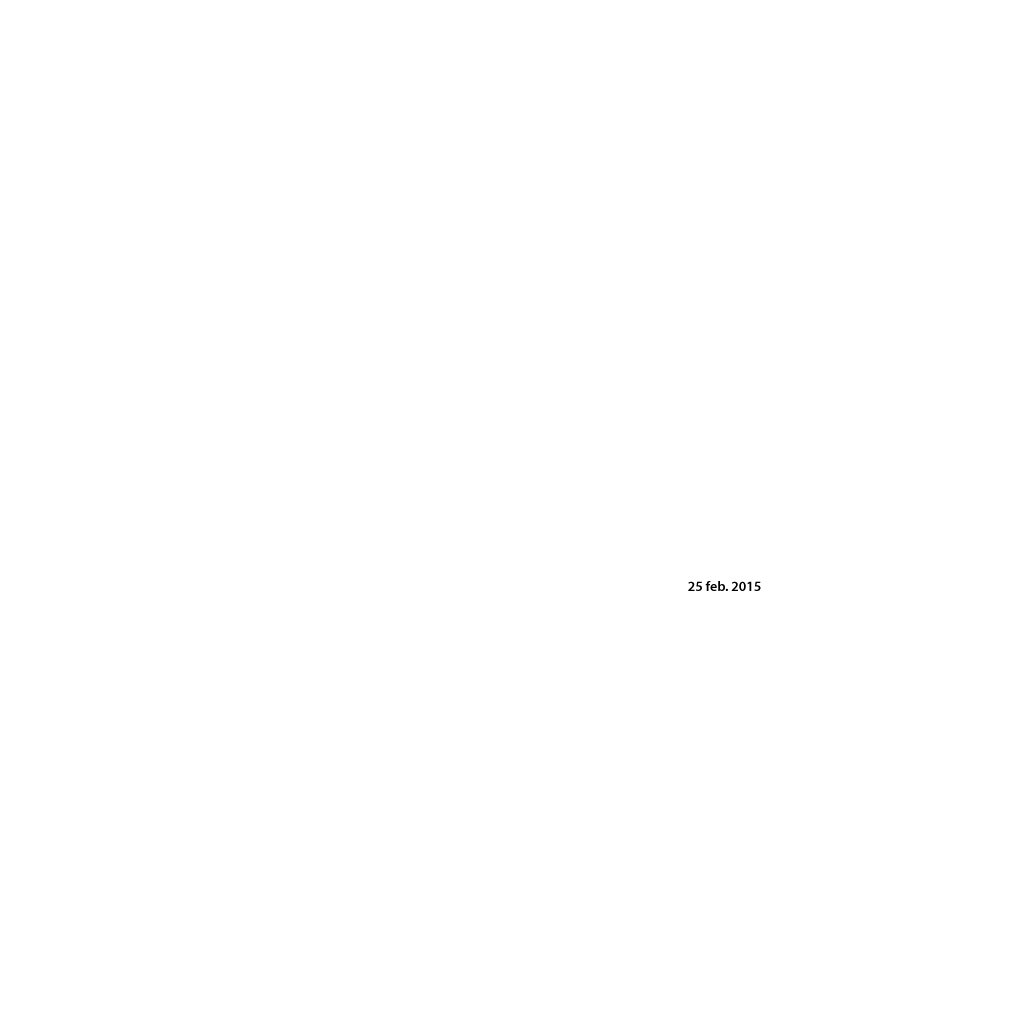
<style>
.page{position:relative;width:1020px;height:1020px;background:#ffffff}
.page>*{position:absolute;margin:0}
.t1{font:14px "MyriadPro-Semibold";color:#000000}
</style>
<div class="page">
<p class="t1" style="left:688px;top:581px;width:73px;height:10px">25 feb. 2015</p>
</div>
